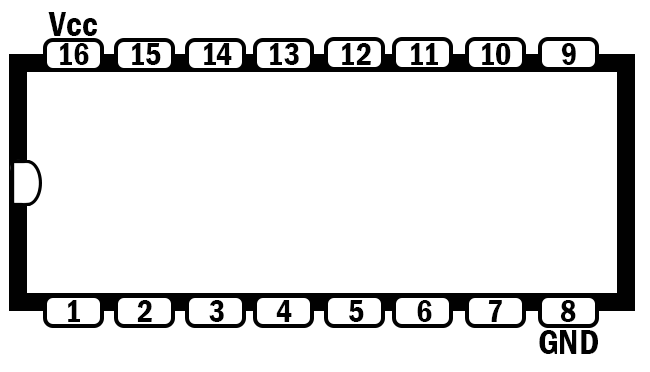
<style>
.page{position:relative;width:650px;height:372px;background:#ffffff}
.page>*{position:absolute;margin:0}
.t1{font:36px "FranklinGothic-DemiCond";color:#000000}
.t2{font:32px "FranklinGothic-DemiCond";color:#000000}
</style>
<div class="page">
<p class="t1" style="left:48px;top:12px;width:50px;height:24px">Vcc</p>
<p class="t2" style="left:60px;top:43px;width:29px;height:22px">16</p>
<p class="t2" style="left:132px;top:43px;width:29px;height:22px">15</p>
<p class="t2" style="left:204px;top:43px;width:28px;height:22px">14</p>
<p class="t2" style="left:270px;top:43px;width:29px;height:22px">13</p>
<p class="t2" style="left:342px;top:43px;width:29px;height:22px">12</p>
<p class="t2" style="left:411px;top:43px;width:27px;height:22px">11</p>
<p class="t2" style="left:482px;top:43px;width:29px;height:22px">10</p>
<p class="t2" style="left:561px;top:43px;width:15px;height:22px">9</p>
<p class="t2" style="left:68px;top:300px;width:12px;height:22px">1</p>
<p class="t2" style="left:137px;top:300px;width:15px;height:22px">2</p>
<p class="t2" style="left:209px;top:300px;width:15px;height:22px">3</p>
<p class="t2" style="left:276px;top:300px;width:16px;height:22px">4</p>
<p class="t2" style="left:349px;top:300px;width:15px;height:22px">5</p>
<p class="t2" style="left:417px;top:300px;width:15px;height:22px">6</p>
<p class="t2" style="left:488px;top:300px;width:14px;height:22px">7</p>
<p class="t2" style="left:560px;top:300px;width:16px;height:22px">8</p>
<p class="t1" style="left:539px;top:330px;width:59px;height:24px">GND</p>
</div>
